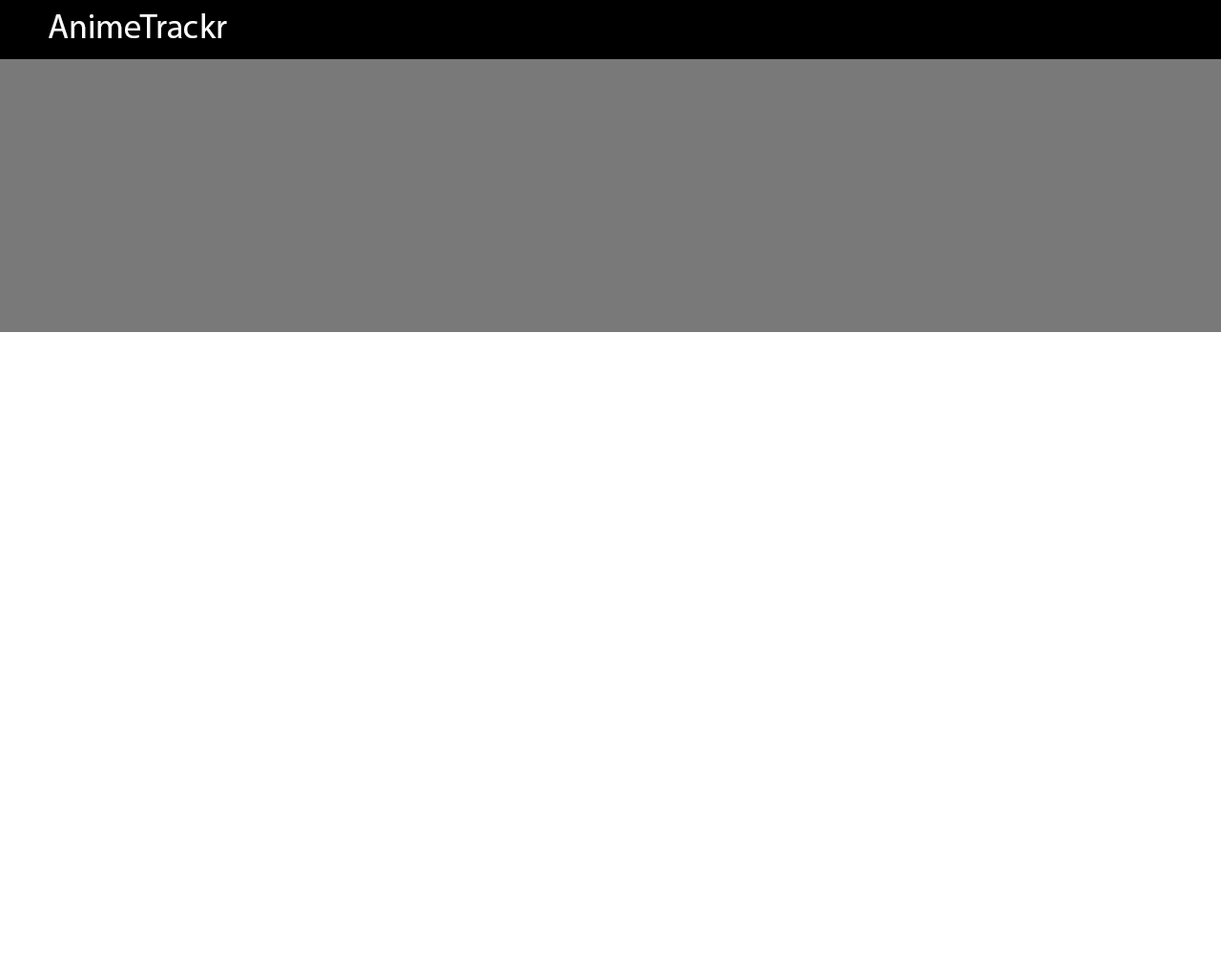
<style>
.page{position:relative;width:1221px;height:977px;background:#ffffff}
.page>*{position:absolute;margin:0}
.t1{font:34.3px "MyriadPro-Regular";color:#f9f9f9}
</style>
<div class="page">
<p class="t1" style="left:49px;top:13px;width:178px;height:25px">AnimeTrackr</p>
</div>
